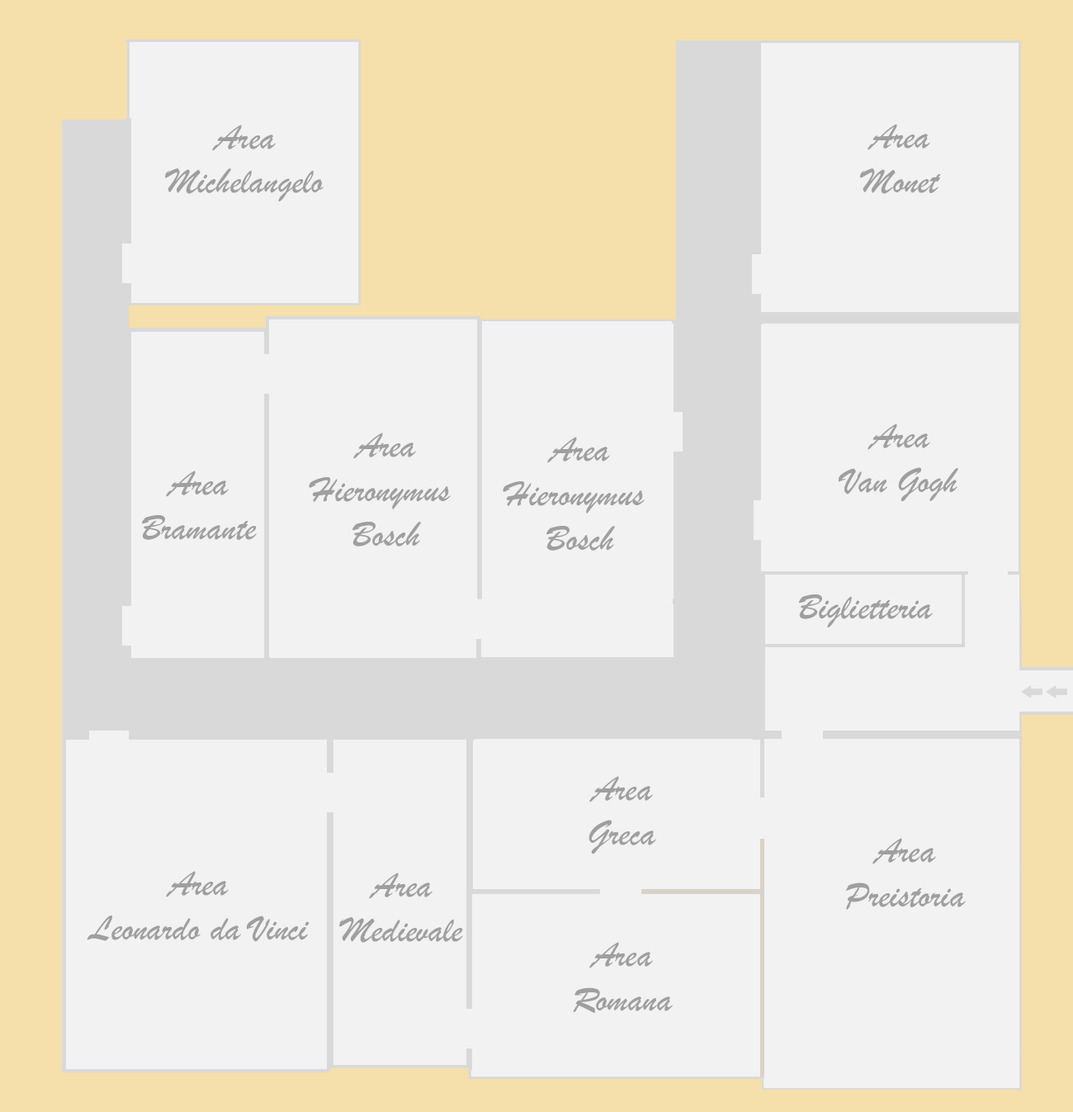
<style>
.page{position:relative;width:1073px;height:1112px;background:#f2f2f2}
.page>*{position:absolute;margin:0}
.t1{font:37px "BrushScriptMT";color:#9f9f9f}
</style>
<div class="page">
<p class="t1" style="left:165px;top:125px;width:158px;height:76px;text-align:center">Area<br>Michelangelo</p>
<p class="t1" style="left:860px;top:124px;width:81px;height:70px;text-align:center">Area<br>Monet</p>
<p class="t1" style="left:838px;top:423px;width:120px;height:79px;text-align:center">Area<br>Van Gogh</p>
<p class="t1" style="left:309px;top:432px;width:142px;height:114px;text-align:center">Area<br>Hieronymus <br>Bosch</p>
<p class="t1" style="left:503px;top:437px;width:141px;height:113px;text-align:center">Area<br>Hieronymus <br>Bosch</p>
<p class="t1" style="left:142px;top:470px;width:115px;height:70px;text-align:center">Area<br>Bramante</p>
<p class="t1" style="left:799px;top:594px;width:133px;height:33px">Biglietteria</p>
<p class="t1" style="left:588px;top:776px;width:68px;height:78px;text-align:center">Area<br>Greca</p>
<p class="t1" style="left:846px;top:838px;width:119px;height:71px;text-align:center">Area<br>Preistoria</p>
<p class="t1" style="left:87px;top:871px;width:222px;height:71px;text-align:center">Area<br>Leonardo da Vinci</p>
<p class="t1" style="left:339px;top:872px;width:124px;height:70px;text-align:center">Area<br>Medievale</p>
<p class="t1" style="left:573px;top:942px;width:100px;height:71px;text-align:center">Area<br>Romana</p>
</div>
